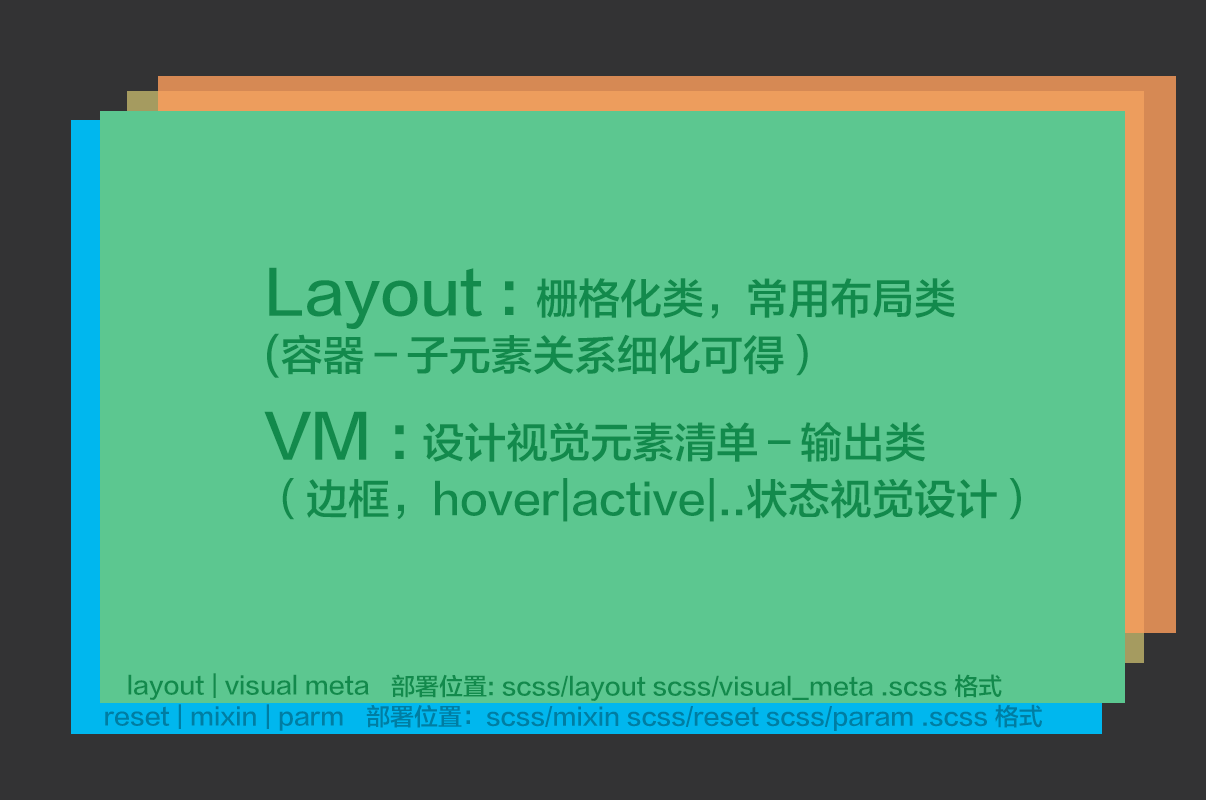
<style>
.page{position:relative;width:1206px;height:800px;background:#5cc790}
.page>*{position:absolute;margin:0}
.t1{font:42px/72px "FZLTZHK--GBK1-0";color:#128a4c}
.t2{font:60px/72px "FZLTZHK--GBK1-0";color:#128a4c}
.t3{font:24px "FZLTZHK--GBK1-0";color:#128a4c}
.t4{font:12px/72px "FZLTZHK--GBK1-0";color:#128a4c}
.t5{font:24px "FZLTZHK--GBK1-0";color:#007da2}
.t6{font:12px/72px "FZLTZHK--GBK1-0";color:#007da2}
</style>
<div class="page">
<p class="t1" style="left:264px;top:267px;width:757px;height:255px"><span class="t2">Layout : </span>栅格化类，常用布局类<br>(容器－子元素关系细化可得）<br><span class="t2">VM : </span>设计视觉元素清单－输出类<br>（边框，hover|active|..状态视觉设计）</p>
<p class="t3" style="left:128px;top:673px;width:241px;height:27px">layout | visual meta</p>
<p class="t4" style="left:391px;top:674px;width:611px;height:27px">部署位置: scss/layout scss/visual_meta .scss 格式</p>
<p class="t5" style="left:105px;top:704px;width:238px;height:27px">reset | mixin | parm</p>
<p class="t6" style="left:366px;top:704px;width:676px;height:27px">部署位置：scss/mixin scss/reset scss/param .scss 格式</p>
</div>
